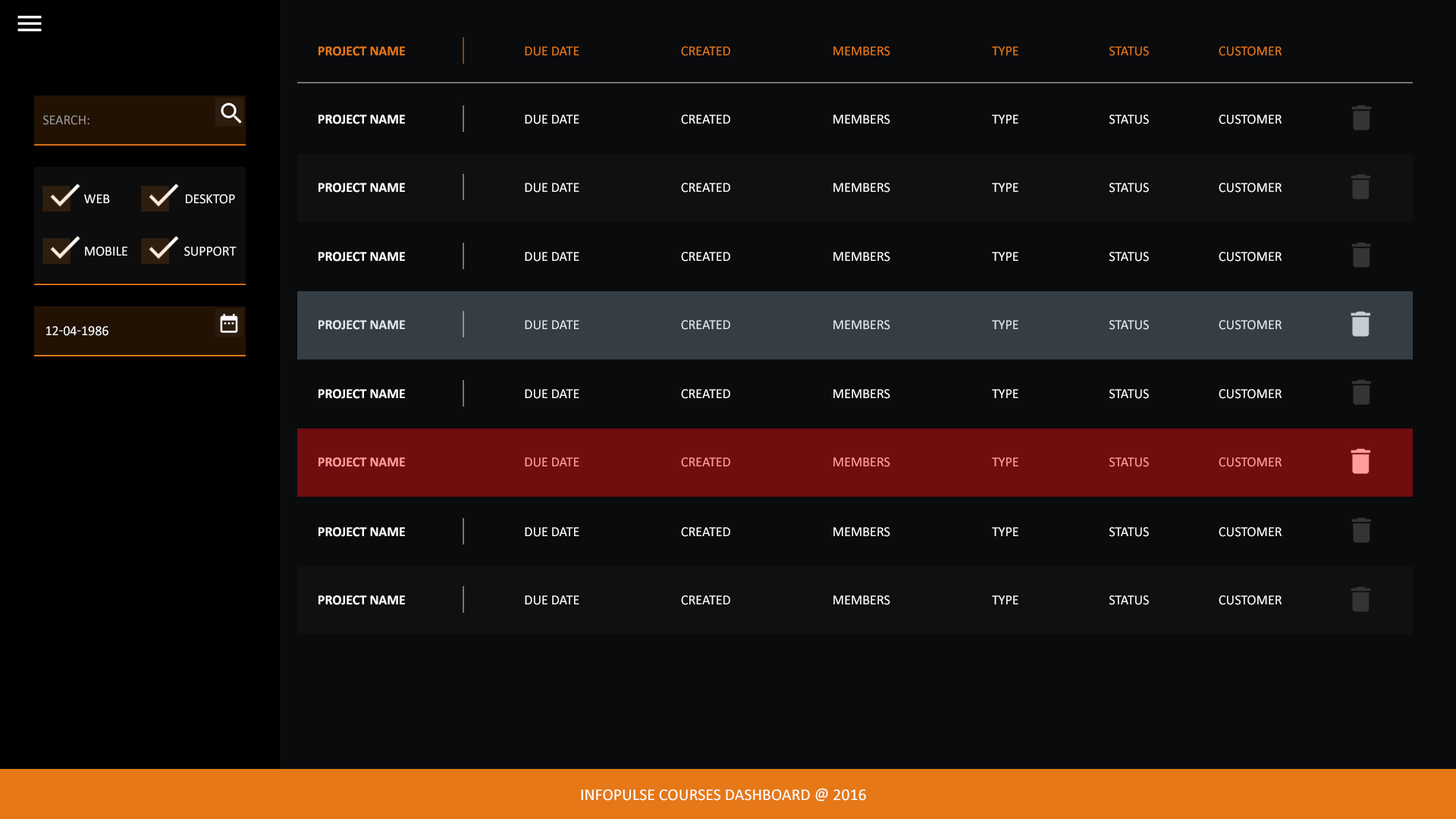
<style>
.page{position:relative;width:1456px;height:819px;background:#0a0b0d}
.page>*{position:absolute;margin:0}
.t1{font:13.6px "Calibri-Bold";color:#e67817;text-transform:uppercase}
.t2{font:13.6px "Calibri";color:#e67817;text-transform:uppercase}
.t3{font:13.6px "Calibri";color:#979390;text-transform:uppercase}
.t4{font:13.6px "Calibri-Bold";color:#ffffff;text-transform:uppercase}
.t5{font:13.6px "Calibri";color:#ffffff;text-transform:uppercase}
.t6{font:13.6px "Calibri";color:#feffff;text-transform:uppercase}
.t7{font:13.6px "Calibri-Bold";color:#e1e8ed;text-transform:uppercase}
.t8{font:13.6px "Calibri";color:#e1e8ed;text-transform:uppercase}
.t9{font:13.6px "Calibri-Bold";color:#ff9d9d;text-transform:uppercase}
.t10{font:13.6px "Calibri";color:#ff9d9d;text-transform:uppercase}
.t11{font:16.5px "Calibri";color:#ffffff;text-transform:uppercase}
</style>
<div class="page">
<p class="t1" style="left:318px;top:46px;width:87px;height:10px">project name</p>
<p class="t2" style="left:525px;top:46px;width:54px;height:10px">due date</p>
<p class="t2" style="left:681px;top:46px;width:49px;height:10px">created</p>
<p class="t2" style="left:833px;top:46px;width:57px;height:10px">members</p>
<p class="t2" style="left:992px;top:46px;width:26px;height:9px">type</p>
<p class="t2" style="left:1109px;top:46px;width:40px;height:10px">status</p>
<p class="t2" style="left:1219px;top:46px;width:63px;height:10px">customer</p>
<p class="t3" style="left:43px;top:115px;width:46px;height:10px">search:</p>
<p class="t4" style="left:318px;top:115px;width:87px;height:9px">project name</p>
<p class="t5" style="left:525px;top:115px;width:54px;height:9px">due date</p>
<p class="t5" style="left:681px;top:115px;width:49px;height:9px">created</p>
<p class="t5" style="left:833px;top:115px;width:57px;height:9px">members</p>
<p class="t5" style="left:992px;top:115px;width:26px;height:9px">type</p>
<p class="t5" style="left:1109px;top:115px;width:40px;height:9px">status</p>
<p class="t5" style="left:1219px;top:115px;width:63px;height:9px">customer</p>
<p class="t4" style="left:318px;top:183px;width:87px;height:10px">project name</p>
<p class="t5" style="left:525px;top:183px;width:54px;height:10px">due date</p>
<p class="t5" style="left:681px;top:183px;width:49px;height:10px">created</p>
<p class="t5" style="left:833px;top:183px;width:57px;height:10px">members</p>
<p class="t5" style="left:992px;top:183px;width:26px;height:9px">type</p>
<p class="t5" style="left:1109px;top:183px;width:40px;height:10px">status</p>
<p class="t5" style="left:1219px;top:183px;width:63px;height:10px">customer</p>
<p class="t6" style="left:84px;top:194px;width:26px;height:9px">web</p>
<p class="t6" style="left:186px;top:194px;width:49px;height:10px">DESKTOP</p>
<p class="t6" style="left:85px;top:246px;width:42px;height:10px">mobile</p>
<p class="t6" style="left:184px;top:246px;width:53px;height:10px">support</p>
<p class="t4" style="left:318px;top:252px;width:87px;height:10px">project name</p>
<p class="t5" style="left:525px;top:252px;width:54px;height:10px">due date</p>
<p class="t5" style="left:681px;top:252px;width:49px;height:10px">created</p>
<p class="t5" style="left:833px;top:252px;width:57px;height:10px">members</p>
<p class="t5" style="left:992px;top:252px;width:26px;height:9px">type</p>
<p class="t5" style="left:1109px;top:252px;width:40px;height:10px">status</p>
<p class="t5" style="left:1219px;top:252px;width:63px;height:10px">customer</p>
<p class="t5" style="left:46px;top:326px;width:62px;height:10px">12-04-1986</p>
<p class="t7" style="left:318px;top:320px;width:87px;height:10px">project name</p>
<p class="t8" style="left:525px;top:320px;width:54px;height:10px">due date</p>
<p class="t8" style="left:681px;top:320px;width:49px;height:10px">created</p>
<p class="t8" style="left:833px;top:320px;width:57px;height:10px">members</p>
<p class="t8" style="left:992px;top:320px;width:26px;height:9px">type</p>
<p class="t8" style="left:1109px;top:320px;width:40px;height:10px">status</p>
<p class="t8" style="left:1219px;top:320px;width:63px;height:10px">customer</p>
<p class="t4" style="left:318px;top:389px;width:87px;height:10px">project name</p>
<p class="t5" style="left:525px;top:389px;width:54px;height:10px">due date</p>
<p class="t5" style="left:681px;top:389px;width:49px;height:10px">created</p>
<p class="t5" style="left:833px;top:389px;width:57px;height:10px">members</p>
<p class="t5" style="left:992px;top:389px;width:26px;height:9px">type</p>
<p class="t5" style="left:1109px;top:389px;width:40px;height:10px">status</p>
<p class="t5" style="left:1219px;top:389px;width:63px;height:10px">customer</p>
<p class="t9" style="left:318px;top:457px;width:87px;height:10px">project name</p>
<p class="t10" style="left:525px;top:457px;width:54px;height:10px">due date</p>
<p class="t10" style="left:681px;top:457px;width:49px;height:10px">created</p>
<p class="t10" style="left:833px;top:457px;width:57px;height:10px">members</p>
<p class="t10" style="left:992px;top:457px;width:26px;height:9px">type</p>
<p class="t10" style="left:1109px;top:457px;width:40px;height:10px">status</p>
<p class="t10" style="left:1219px;top:457px;width:63px;height:10px">customer</p>
<p class="t4" style="left:318px;top:527px;width:87px;height:10px">project name</p>
<p class="t5" style="left:525px;top:527px;width:54px;height:10px">due date</p>
<p class="t5" style="left:681px;top:527px;width:49px;height:10px">created</p>
<p class="t5" style="left:833px;top:527px;width:57px;height:10px">members</p>
<p class="t5" style="left:992px;top:527px;width:26px;height:9px">type</p>
<p class="t5" style="left:1109px;top:527px;width:40px;height:10px">status</p>
<p class="t5" style="left:1219px;top:527px;width:63px;height:10px">customer</p>
<p class="t4" style="left:318px;top:595px;width:87px;height:10px">project name</p>
<p class="t5" style="left:525px;top:595px;width:54px;height:10px">due date</p>
<p class="t5" style="left:681px;top:595px;width:49px;height:10px">created</p>
<p class="t5" style="left:833px;top:595px;width:57px;height:10px">members</p>
<p class="t5" style="left:992px;top:595px;width:26px;height:9px">type</p>
<p class="t5" style="left:1109px;top:595px;width:40px;height:10px">status</p>
<p class="t5" style="left:1219px;top:595px;width:63px;height:10px">customer</p>
<p class="t11" style="left:581px;top:788px;width:285px;height:14px">infopulse courses dashboard @ 2016</p>
</div>
